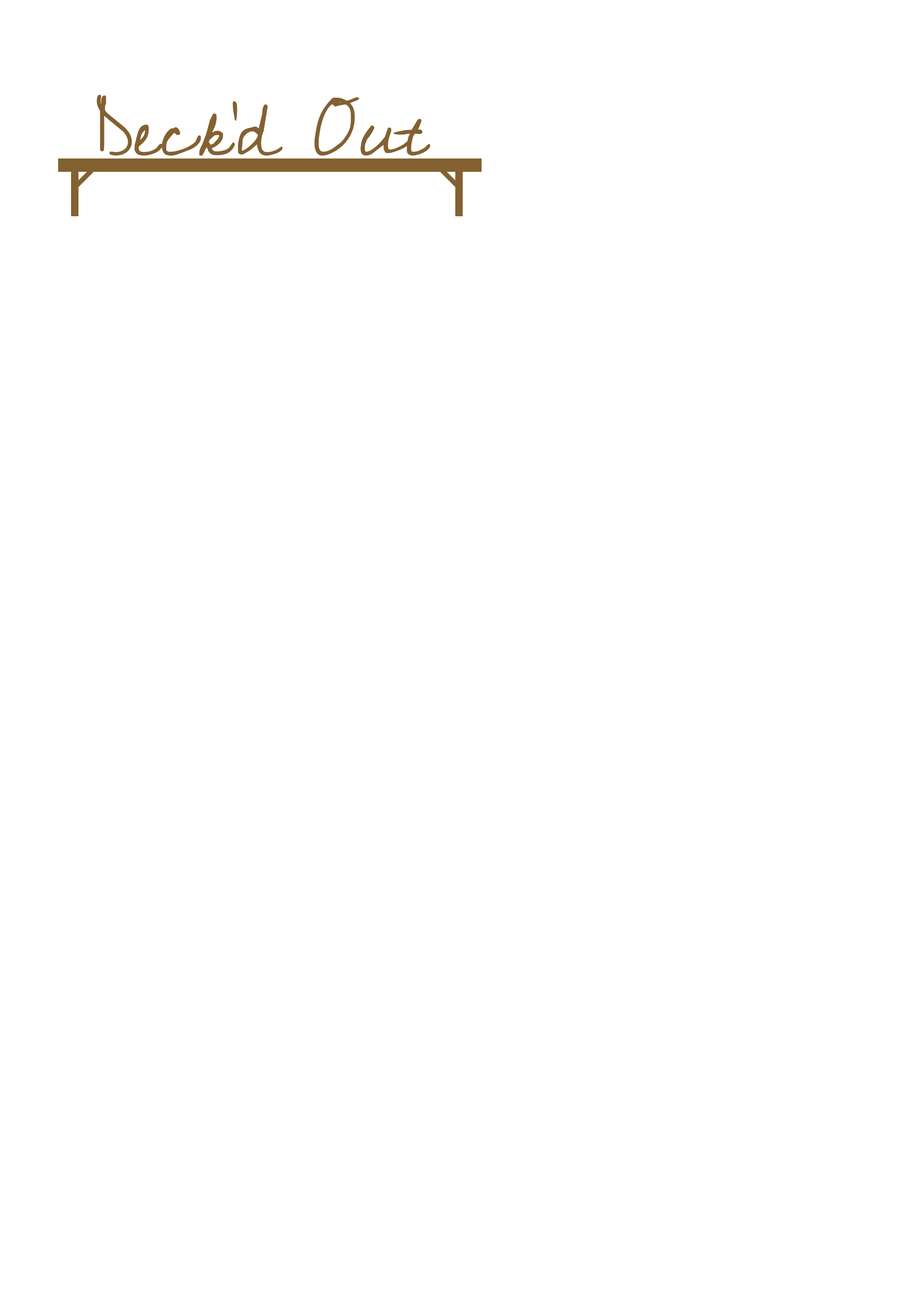
<style>
.page{position:relative;width:918px;height:1299px;background:#ffffff}
.page>*{position:absolute;margin:0}
.t1{font:74px "Cedarville-Cursive";color:#836131}
</style>
<div class="page">
<p class="t1" style="left:97px;top:94px;width:334px;height:62px">Deck’d Out</p>
</div>
